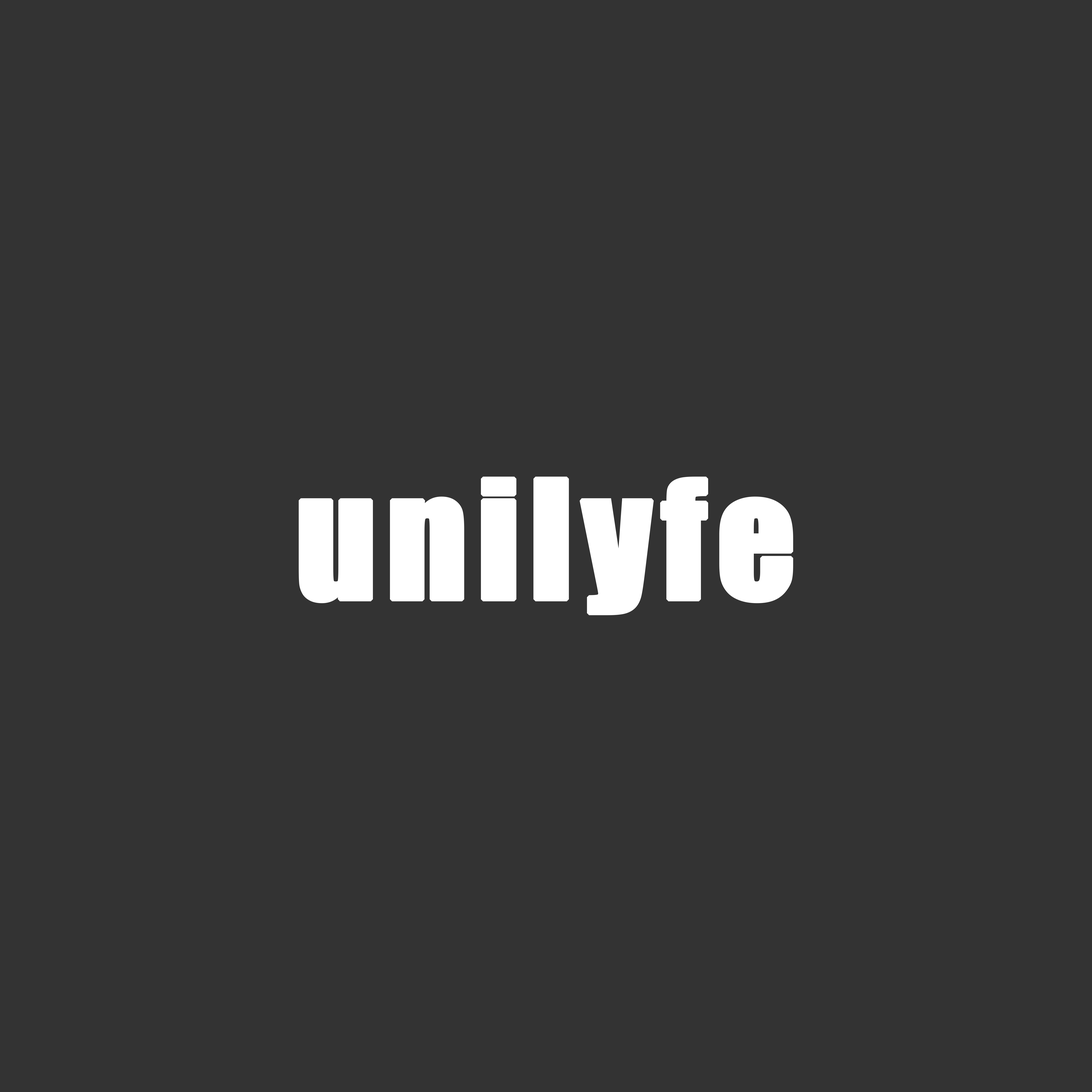
<style>
.page{position:relative;width:1092px;height:1092px;background:#333333}
.page>*{position:absolute;margin:0}
.t1{font:152.5px "Impact";letter-spacing:0.04em;color:#ffffff;font-weight:bold}
</style>
<div class="page">
<p class="t1" style="left:299px;top:476px;width:494px;height:139px">unilyfe</p>
</div>
